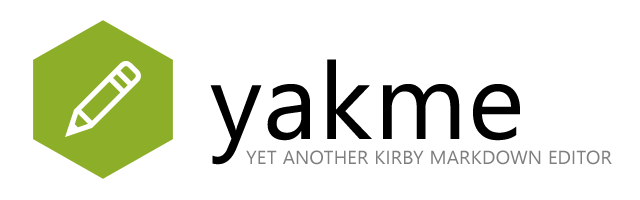
<style>
.page{position:relative;width:640px;height:200px;background:#ffffff}
.page>*{position:absolute;margin:0}
.t1{font:107px "SegoeUI";letter-spacing:0.02em;color:#000000}
.t2{font:19px "SegoeUI";letter-spacing:0.02em;color:#7f7f7f}
</style>
<div class="page">
<p class="t1" style="left:210px;top:59px;width:310px;height:106px">yakme</p>
<p class="t2" style="left:246px;top:150px;width:366px;height:15px">YET ANOTHER KIRBY MARKDOWN EDITOR</p>
</div>
